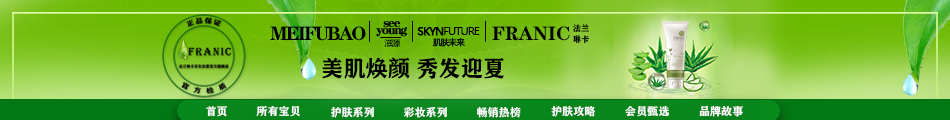
<style>
.page{position:relative;width:950px;height:120px}
.page>*{position:absolute;margin:0}
.t1{font:19.4px "FZCHSJW--GB1-0";letter-spacing:-0.1em;color:#000000}
.t2{font:11.1px "MicrosoftYaHei";letter-spacing:-0.1em;color:#000000}
.t3{font:11.1px "MicrosoftYaHei";letter-spacing:-0.1em;color:#000000;font-weight:bold}
.t4{font:19.4px "FZCHSJW--GB1-0";color:#000000}
.t5{font:8.3px/11.1px "FZCHSJW--GB1-0";color:#000000}
.t6{font:8.3px "MicrosoftYaHei";letter-spacing:-0.1em}
.t7{font:8.3px "MicrosoftYaHei";letter-spacing:-0.1em;color:#000000;font-weight:bold}
.t8{font:22.2px "FZCHSJW--GB1-0";color:#000000}
.t9{font:11.1px "FZCHSJW--GB1-0";color:#ffffff}
</style>
<div class="page">
<p class="t1" style="left:270px;top:26px;width:96px;height:15px">MEIFUBAO</p>
<p class="t2" style="left:417px;top:27px;width:63px;height:9px"><span class="t3">SKYN</span>FUTURE</p>
<p class="t4" style="left:492px;top:26px;width:78px;height:15px">FRANIC</p>
<p class="t5" style="left:573px;top:24px;width:17px;height:20px;text-align:center">法兰<br>琳卡</p>
<p class="t6" style="left:384px;top:39px;width:16px;height:9px">滋源</p>
<p class="t7" style="left:432px;top:37px;width:33px;height:10px">肌肤未来</p>
<p class="t8" style="left:322px;top:57px;width:183px;height:22px">美肌焕颜 秀发迎夏</p>
<p class="t9" style="left:206px;top:106px;width:21px;height:11px">首页</p>
<p class="t9" style="left:256px;top:106px;width:44px;height:11px">所有宝贝</p>
<p class="t9" style="left:331px;top:106px;width:43px;height:12px">护肤系列</p>
<p class="t9" style="left:404px;top:107px;width:43px;height:11px">彩妆系列</p>
<p class="t9" style="left:477px;top:106px;width:44px;height:12px">畅销热榜</p>
<p class="t9" style="left:551px;top:105px;width:44px;height:12px">护肤攻略</p>
<p class="t9" style="left:625px;top:105px;width:44px;height:12px">会员甄选</p>
<p class="t9" style="left:699px;top:105px;width:44px;height:12px">品牌故事</p>
</div>
